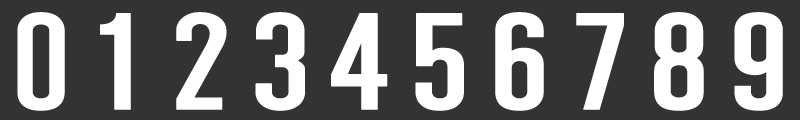
<style>
.page{position:relative;width:800px;height:120px;background:#333333}
.page>*{position:absolute;margin:0}
.t1{font:120px "HGGothicE";color:#ffffff;font-weight:bold;scale:1.26 1}
</style>
<div class="page">
<p class="t1" style="left:17px;top:12px;width:766px;height:99px">0123456789</p>
</div>
